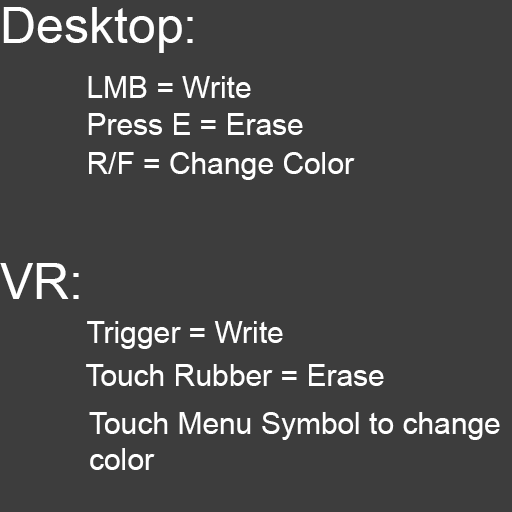
<style>
.page{position:relative;width:512px;height:512px;background:#3d3d3d}
.page>*{position:absolute;margin:0}
.t1{font:50px "ArialMT";color:#ffffff}
.t2{font:30px "ArialMT";color:#ffffff}
</style>
<div class="page">
<p class="t1" style="left:3px;top:7px;width:190px;height:46px">Desktop:</p>
<p class="t2" style="left:88px;top:76px;width:163px;height:22px">LMB = Write</p>
<p class="t2" style="left:88px;top:113px;width:215px;height:22px">Press E = Erase</p>
<p class="t2" style="left:89px;top:152px;width:266px;height:28px">R/F = Change Color</p>
<p class="t1" style="left:0px;top:263px;width:79px;height:36px">VR:</p>
<p class="t2" style="left:87px;top:321px;width:196px;height:28px">Trigger = Write</p>
<p class="t2" style="left:86px;top:364px;width:298px;height:22px">Touch Rubber = Erase</p>
<p class="t2" style="left:89px;top:412px;width:411px;height:58px">Touch Menu Symbol to change<br>color</p>
</div>
